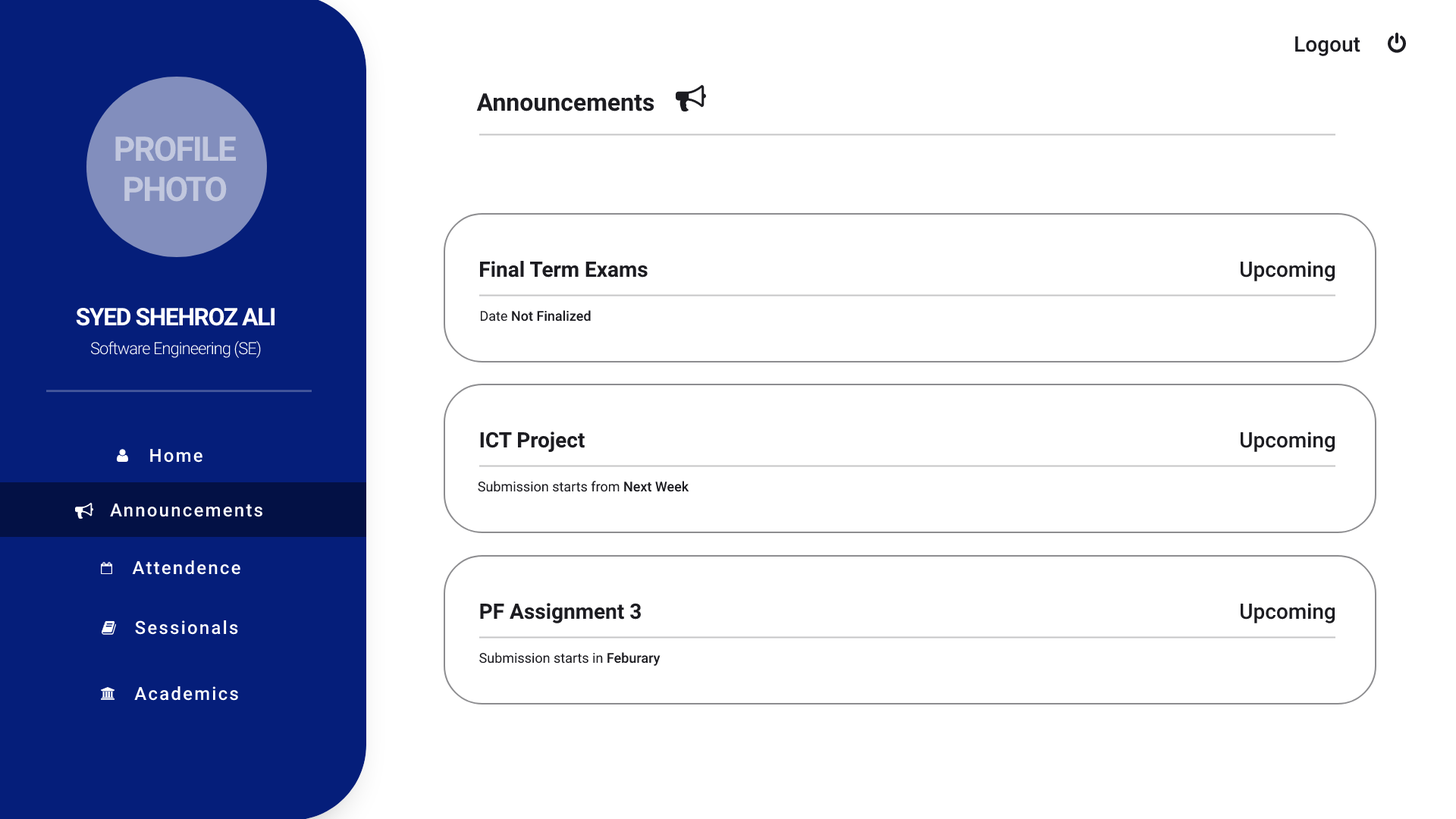
<style>
.page{position:relative;width:1456px;height:819px;background:#ffffff}
.page>*{position:absolute;margin:0}
.t1{font:21.2px "Roboto-Medium";color:#1c1c21}
.t2{font:24.3px "Roboto-Bold";color:#1c1c21}
.t3{font:33.8px "Roboto-Bold";letter-spacing:-0.046em;color:#c1c7de}
.t4{font:21.2px "Roboto-Bold";color:#1c1c21}
.t5{font:24.3px "Roboto-Bold";letter-spacing:-0.046em;color:#ffffff}
.t6{font:13.6px "Roboto-Medium";color:#1c1c21}
.t7{font:13.6px "Roboto-Regular";color:#1c1c21}
.t8{font:16.7px "Roboto-Light";letter-spacing:-0.046em;color:#ffffff}
.t9{font:18.2px "Roboto-Medium";letter-spacing:0.092em;color:#ffffff}
</style>
<div class="page">
<p class="t1" style="left:1295px;top:36px;width:65px;height:20px">Logout</p>
<p class="t2" style="left:476px;top:93px;width:178px;height:18px">Announcements</p>
<p class="t3" style="left:115px;top:136px;width:121px;height:66px;text-align:center">PROFILE<br>PHOTO</p>
<p class="t4" style="left:480px;top:261px;width:168px;height:17px">Final Term Exams</p>
<p class="t1" style="left:1240px;top:261px;width:95px;height:20px">Upcoming</p>
<p class="t5" style="left:76px;top:307px;width:199px;height:19px">SYED SHEHROZ ALI</p>
<p class="t6" style="left:480px;top:310px;width:111px;height:12px"><span class="t7">Date </span>Not Finalized</p>
<p class="t8" style="left:90px;top:340px;width:171px;height:19px">Software Engineering (SE)</p>
<p class="t4" style="left:480px;top:431px;width:105px;height:21px">ICT Project</p>
<p class="t1" style="left:1240px;top:431px;width:95px;height:21px">Upcoming</p>
<p class="t9" style="left:150px;top:448px;width:52px;height:15px">Home</p>
<p class="t7" style="left:478px;top:481px;width:211px;height:11px">Submission starts from <span class="t6">Next Week</span></p>
<p class="t9" style="left:110px;top:503px;width:152px;height:14px">Announcements</p>
<p class="t9" style="left:132px;top:560px;width:108px;height:15px">Attendence</p>
<p class="t4" style="left:480px;top:603px;width:161px;height:20px">PF Assignment 3</p>
<p class="t1" style="left:1240px;top:603px;width:95px;height:20px">Upcoming</p>
<p class="t9" style="left:135px;top:620px;width:103px;height:15px">Sessionals</p>
<p class="t7" style="left:479px;top:652px;width:181px;height:14px">Submission starts in <span class="t6">Feburary</span></p>
<p class="t9" style="left:134px;top:686px;width:104px;height:15px">Academics</p>
</div>
